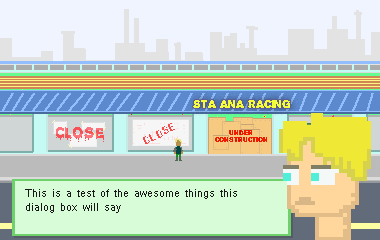
<style>
.page{position:relative;width:380px;height:240px}
.page>*{position:absolute;margin:0}
.t1{font:10px "Propaganda";color:#f5fd23}
.t2{font:12px "Shruti";color:#171717}
</style>
<div class="page">
<p class="t1" style="left:193px;top:100px;width:97px;height:8px">STA ANA RACING</p>
<p class="t2" style="left:25px;top:189px;width:212px;height:24px">This is a test of the awesome things this <br>dialog box will say</p>
</div>
